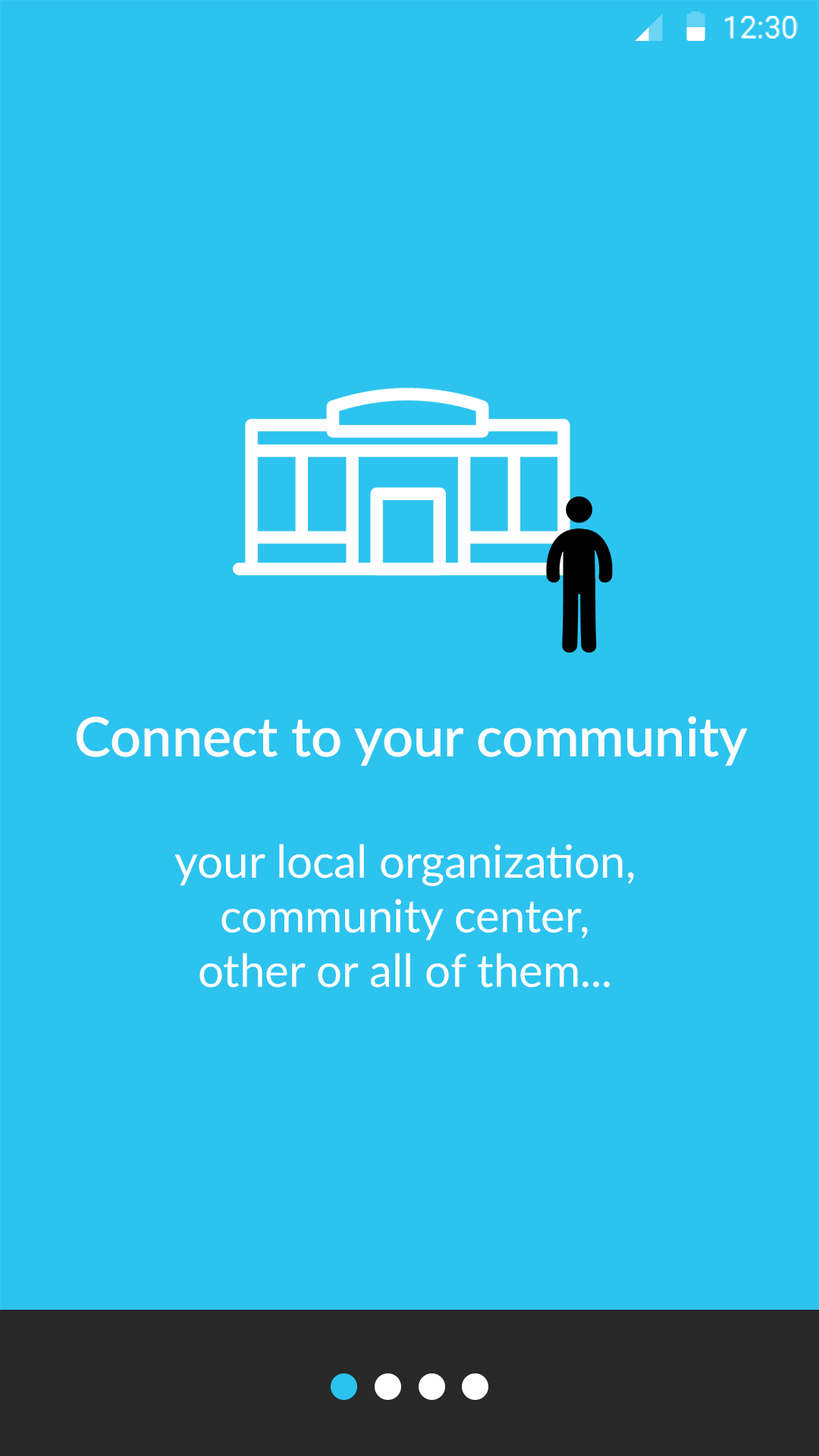
<style>
.page{position:relative;width:819px;height:1456px;background:#2cc3ef}
.page>*{position:absolute;margin:0}
.t1{font:30.3px "Roboto-Regular";color:#ffffff}
.t2{font:54.6px "Lato-Semibold";color:#fffefe}
.t3{font:45.5px "Lato-Regular";color:#fffefe}
</style>
<div class="page">
<p class="t1" style="left:725px;top:16px;width:73px;height:23px">12:30</p>
<p class="t2" style="left:77px;top:716px;width:671px;height:50px">Connect to your community</p>
<p class="t3" style="left:174px;top:844px;width:460px;height:144px;text-align:center">your local organization, <br>community center, <br>other or all of them...</p>
</div>
